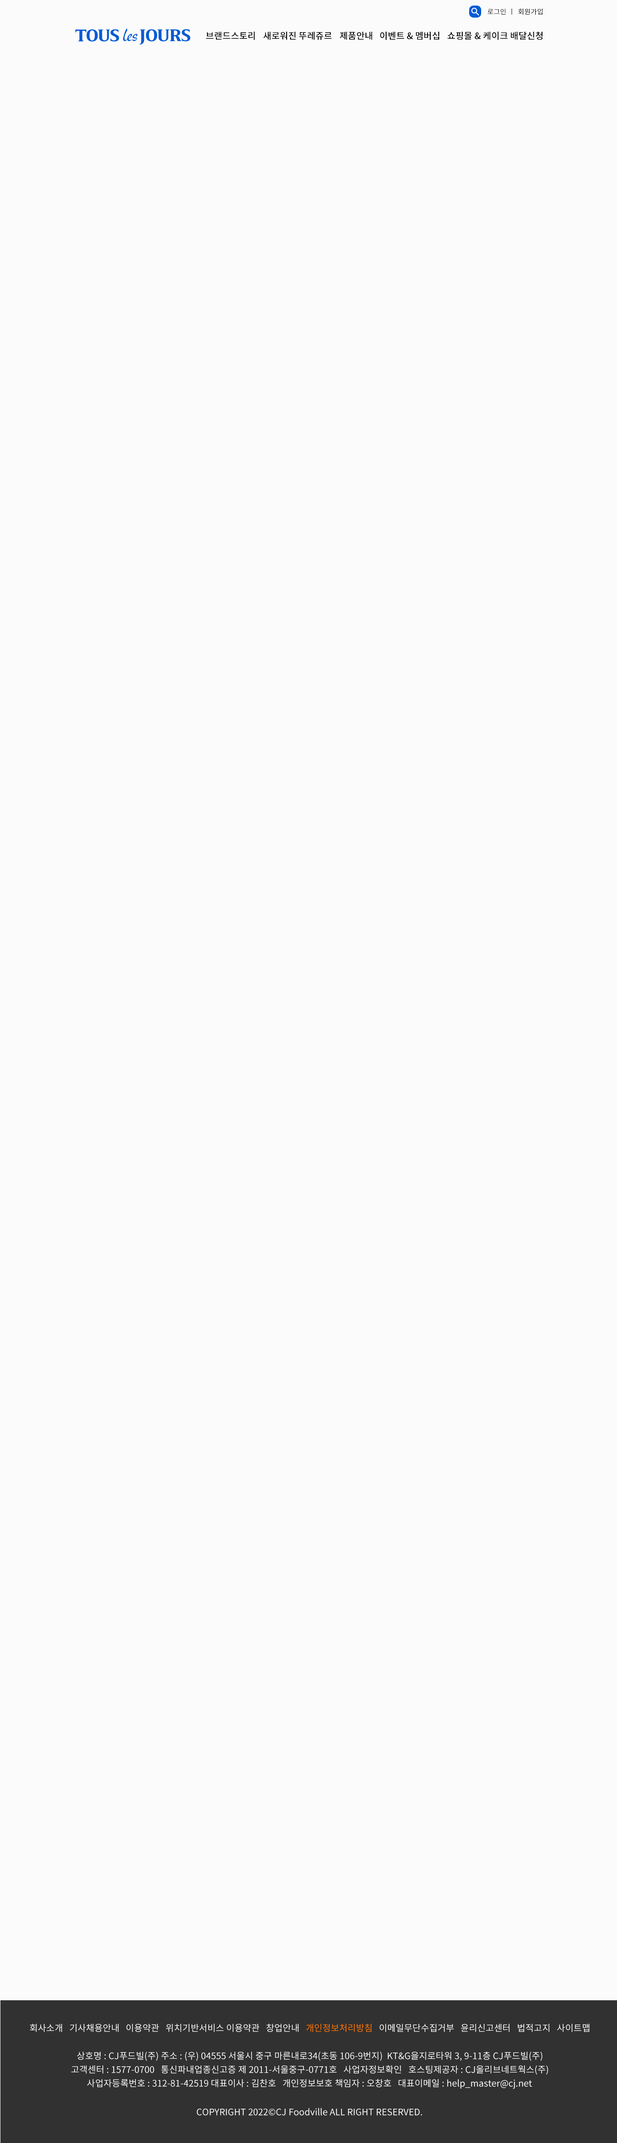
<style>
.page{position:relative;width:617px;height:2143px;background:#fbfbfb}
.page>*{position:absolute;margin:0}
.t1{font:6.9px "NotoSansCJKkr-Regular";letter-spacing:0.01em;color:#000000}
.t2{font:9px "NotoSansCJKkr-Medium";letter-spacing:0.01em;color:#000000}
.t3{font:9px "NotoSansCJKkr-DemiLight";letter-spacing:0.01em;color:#ffffff}
.t4{font:9px "NotoSansCJKkr-DemiLight";letter-spacing:0.01em;color:#ff7800}
</style>
<div class="page">
<p class="t1" style="left:488px;top:9px;width:18px;height:6px">로그인</p>
<p class="t1" style="left:518px;top:9px;width:25px;height:6px">회원가입</p>
<p class="t2" style="left:206px;top:31px;width:49px;height:9px">브랜드스토리</p>
<p class="t2" style="left:263px;top:31px;width:69px;height:9px">새로워진 뚜레쥬르</p>
<p class="t2" style="left:340px;top:32px;width:32px;height:8px">제품안내</p>
<p class="t2" style="left:380px;top:31px;width:59px;height:9px">이벤트 &amp; 멤버십</p>
<p class="t2" style="left:447px;top:31px;width:96px;height:9px">쇼핑몰 &amp; 케이크 배달신청</p>
<p class="t3" style="left:30px;top:2023px;width:560px;height:9px">회사소개   기사채용안내   이용약관   위치기반서비스 이용약관   창업안내   <span class="t4">개인정보처리방침   </span>이메일무단수집거부   윤리신고센터   법적고지   사이트맵</p>
<p class="t3" style="left:77px;top:2051px;width:466px;height:10px">상호명 : CJ푸드빌(주) 주소 : (우) 04555 서울시 중구 마른내로34(초동 106-9번지)  KT&amp;G을지로타워 3, 9-11층 CJ푸드빌(주)</p>
<p class="t3" style="left:71px;top:2065px;width:477px;height:10px">고객센터 : 1577-0700   통신파내업종신고증 제 2011-서울중구-0771호   사업자정보확인   호스팅제공자 : CJ올리브네트웍스(주)</p>
<p class="t3" style="left:87px;top:2079px;width:445px;height:10px">사업자등록번호 : 312-81-42519 대표이사 : 김찬호   개인정보보호 책임자 : 오창호   대표이메일 : help_master@cj.net</p>
<p class="t3" style="left:197px;top:2108px;width:225px;height:7px">COPYRIGHT 2022©CJ Foodville ALL RIGHT RESERVED.</p>
</div>
